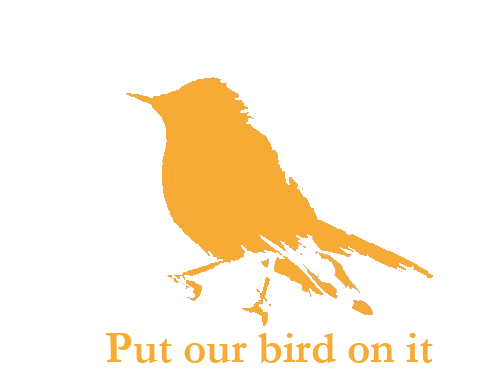
<style>
.page{position:relative;width:500px;height:383px;background:#ffffff}
.page>*{position:absolute;margin:0}
.t1{font:45px "Garamond-Bold";color:#f5ab35}
</style>
<div class="page">
<p class="t1" style="left:106px;top:333px;width:327px;height:30px">Put our bird on it</p>
</div>
